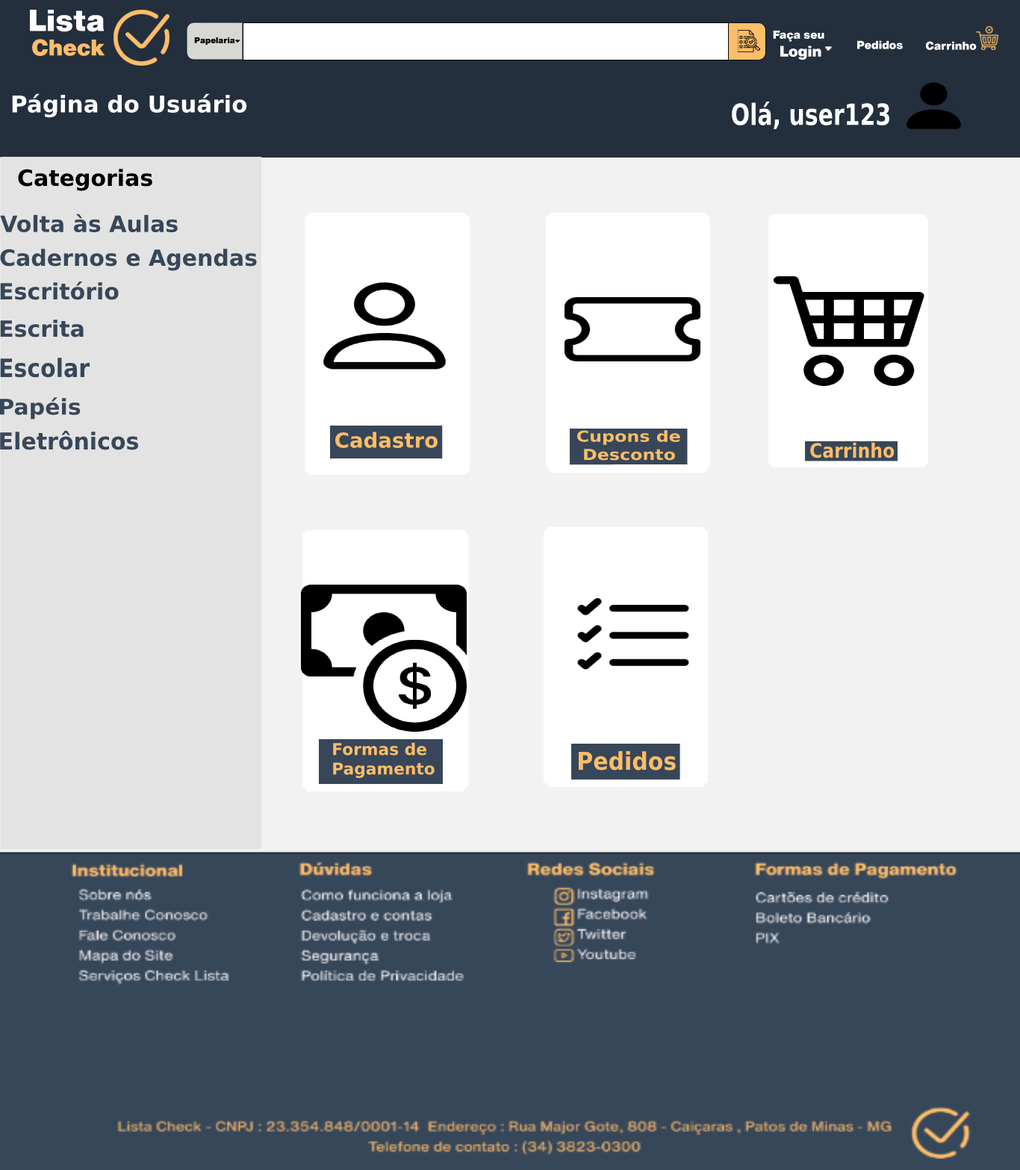
<style>
.page{position:relative;width:1020px;height:1170px;background:#f2f2f2}
.page>*{position:absolute;margin:0}
.t1{font:29.9px "HelveticaNowText-Black";color:#ffffff}
.t2{font:22.4px "HelveticaNowText-Black";color:#febd69}
.t3{font:8.2px "HelveticaNowText-Black";color:#000000}
.t4{font:11.2px "HelveticaNowText-Black";color:#ffffff}
.t5{font:14.9px "HelveticaNowText-Black";color:#ffffff}
.t6{font:23.1px "HelveticaNowText-Black";color:#ffffff}
.t7{font:29.3px "HelveticaNowText-Black";color:#ffffff;scale:0.76 1}
.t8{font:22.4px "HelveticaNowText-Black";color:#000000}
.t9{font:22.4px "HelveticaNowText-Black";color:#374759}
.t10{font:25.2px "HelveticaNowText-Black";color:#374759;scale:0.89 1}
.t11{font:21.5px "HelveticaNowText-Black";color:#374759;scale:1.04 1}
.t12{font:23.3px "HelveticaNowText-Black";color:#374759;scale:0.96 1}
.t13{font:20.6px "HelveticaNowText-Black";color:#febd69}
.t14{font:15.2px "HelveticaNowText-Black";color:#febd69;scale:1.17 1}
.t15{font:19.8px "HelveticaNowText-Black";color:#febd69;scale:0.89 1}
.t16{font:16.2px "HelveticaNowText-Black";color:#febd69}
.t17{font:24.5px "HelveticaNowText-Black";color:#febd69;scale:0.91 1}
</style>
<div class="page">
<p class="t1" style="left:30px;top:10px;width:74px;height:22px">Lista</p>
<p class="t2" style="left:32px;top:39px;width:72px;height:17px">Check</p>
<p class="t3" style="left:194px;top:37px;width:41px;height:8px">Papelaria</p>
<p class="t4" style="left:772px;top:31px;width:52px;height:29px;text-align:center">Faça seu<br><span class="t5"> Login</span></p>
<p class="t4" style="left:857px;top:40px;width:45px;height:9px">Pedidos</p>
<p class="t4" style="left:926px;top:41px;width:50px;height:9px">Carrinho</p>
<p class="t6" style="left:12px;top:93px;width:235px;height:25px">Página do Usuário</p>
<p class="t7" style="left:731px;top:102px;width:158px;height:27px">Olá, user123</p>
<p class="t8" style="left:18px;top:169px;width:134px;height:22px">Categorias</p>
<p class="t9" style="left:0px;top:213px;width:178px;height:20px">Volta às Aulas</p>
<p class="t9" style="left:0px;top:249px;width:257px;height:22px">Cadernos e Agendas</p>
<p class="t9" style="left:0px;top:281px;width:119px;height:19px">Escritório</p>
<p class="t9" style="left:0px;top:319px;width:84px;height:18px">Escrita</p>
<p class="t10" style="left:0px;top:358px;width:90px;height:20px">Escolar</p>
<p class="t11" style="left:0px;top:397px;width:81px;height:22px">Papéis</p>
<p class="t12" style="left:0px;top:431px;width:138px;height:19px">Eletrônicos</p>
<p class="t13" style="left:335px;top:431px;width:102px;height:17px">Cadastro</p>
<p class="t14" style="left:576px;top:430px;width:104px;height:31px">Cupons de<br> Desconto</p>
<p class="t15" style="left:810px;top:442px;width:84px;height:16px">Carrinho</p>
<p class="t16" style="left:333px;top:742px;width:101px;height:36px">Formas de<br>Pagamento</p>
<p class="t17" style="left:578px;top:751px;width:97px;height:19px">Pedidos</p>
</div>
